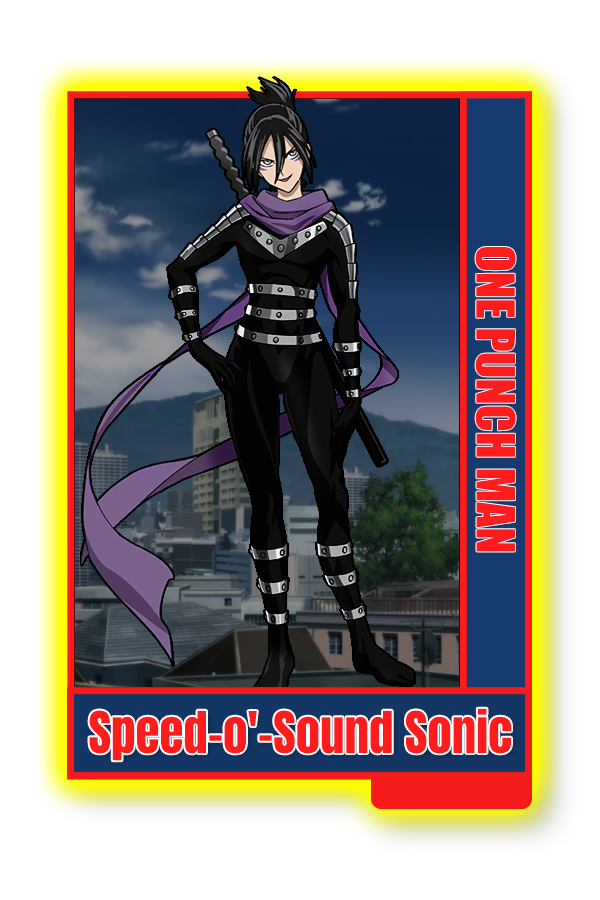
<style>
.page{position:relative;width:600px;height:900px;background:#ffffff}
.page>*{position:absolute;margin:0}
.t1{font:48.8px "Impact";color:#ff1c1c}
.t2{font:49px "Impact";color:#ff1c1c}
</style>
<div class="page">
<p class="t1" style="left:475px;top:246px;width:41px;height:306px;rotate:90deg">ONE PUNCH MAN</p>
<p class="t2" style="left:89px;top:708px;width:422px;height:53px">Speed-o'-Sound Sonic</p>
</div>
